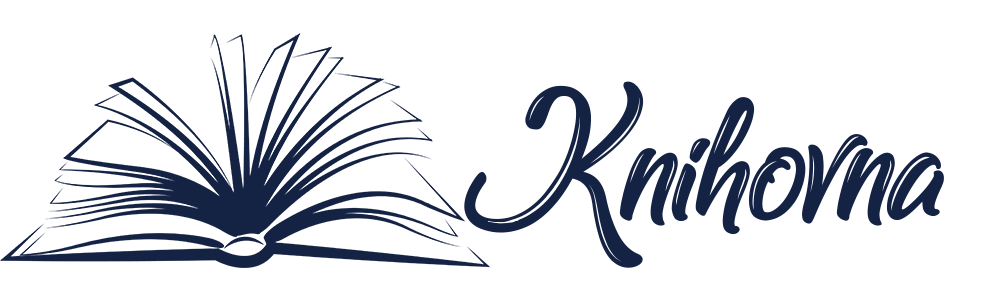
<style>
.page{position:relative;width:1004px;height:300px;background:#ffffff}
.page>*{position:absolute;margin:0}
.t1{font:132.1px "Amazing-Kids";color:#142243}
</style>
<div class="page">
<p class="t1" style="left:464px;top:81px;width:480px;height:187px">Knihovna</p>
</div>
